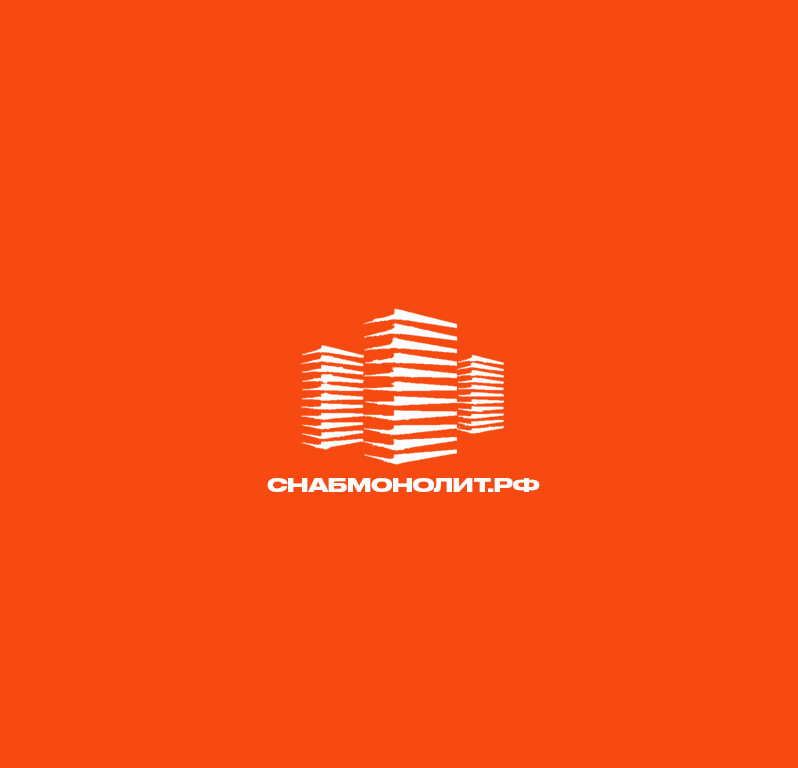
<style>
.page{position:relative;width:798px;height:768px;background:#f74a11}
.page>*{position:absolute;margin:0}
.t1{font:18px "DrukWideCyr-Bold";color:#ffffff}
.t2{font:18px "DrukWideCyr-Bold";color:#fcfcfc}
</style>
<div class="page">
<p class="t1" style="left:267px;top:478px;width:273px;height:14px">СНАБМОНОЛИТ.<span class="t2">РФ</span></p>
</div>
